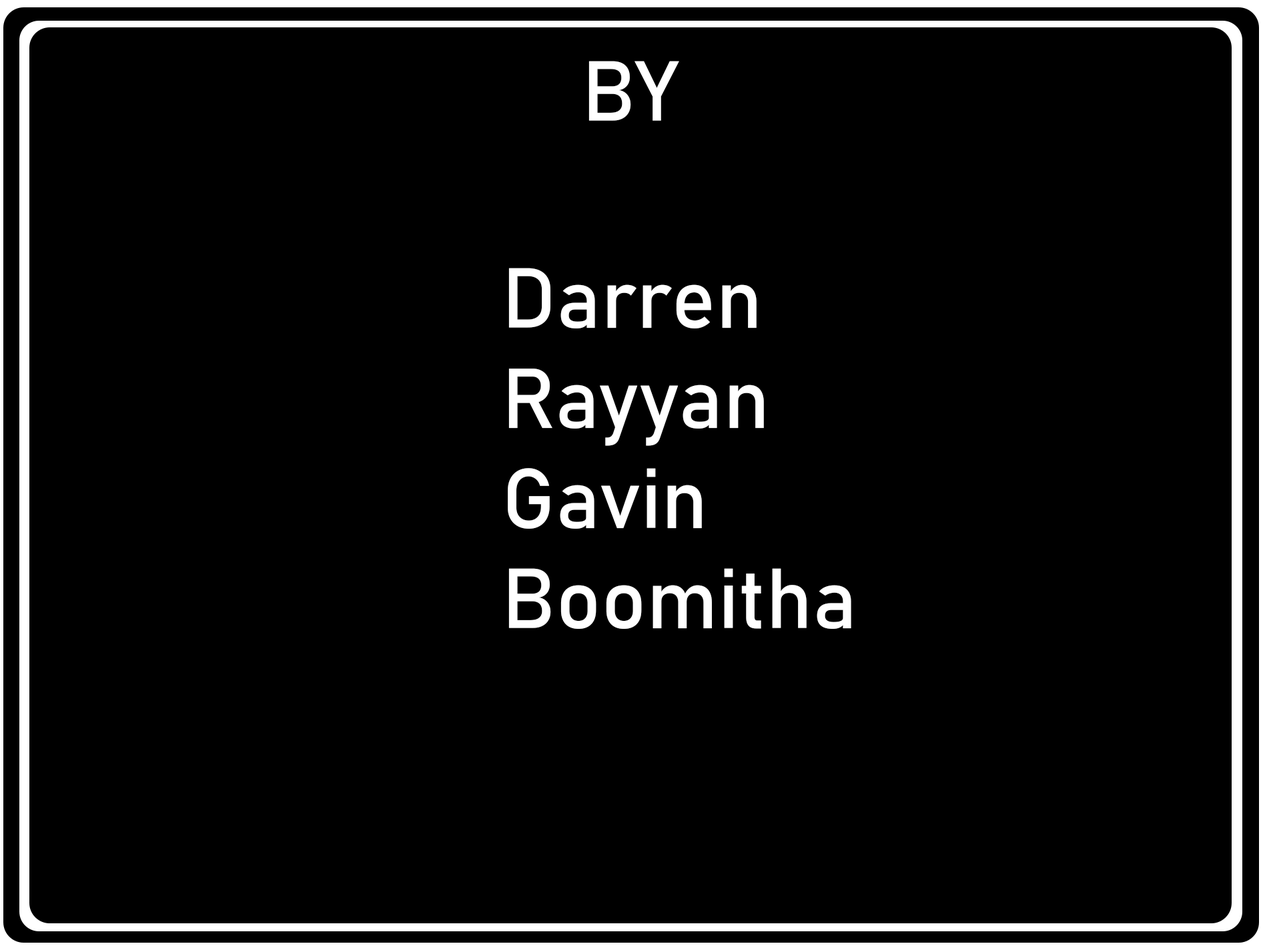
<style>
.page{position:relative;width:1261px;height:946px;background:#000000}
.page>*{position:absolute;margin:0}
.t1{font:83.4px "Bahnschrift";color:#ffffff}
</style>
<div class="page">
<p class="t1" style="left:589px;top:61px;width:90px;height:60px">BY</p>
<p class="t1" style="left:508px;top:268px;width:343px;height:361px">Darren<br>Rayyan<br>Gavin<br>Boomitha</p>
</div>
